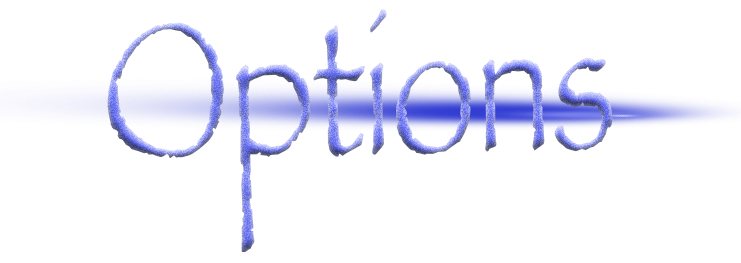
<style>
.page{position:relative;width:741px;height:263px;background:#ffffff}
.page>*{position:absolute;margin:0}
.t1{font:200px "Papyrus-Condensed"}
</style>
<div class="page">
<p class="t1" style="left:107px;top:9px;width:506px;height:243px;rotate:-1deg">Options</p>
</div>
